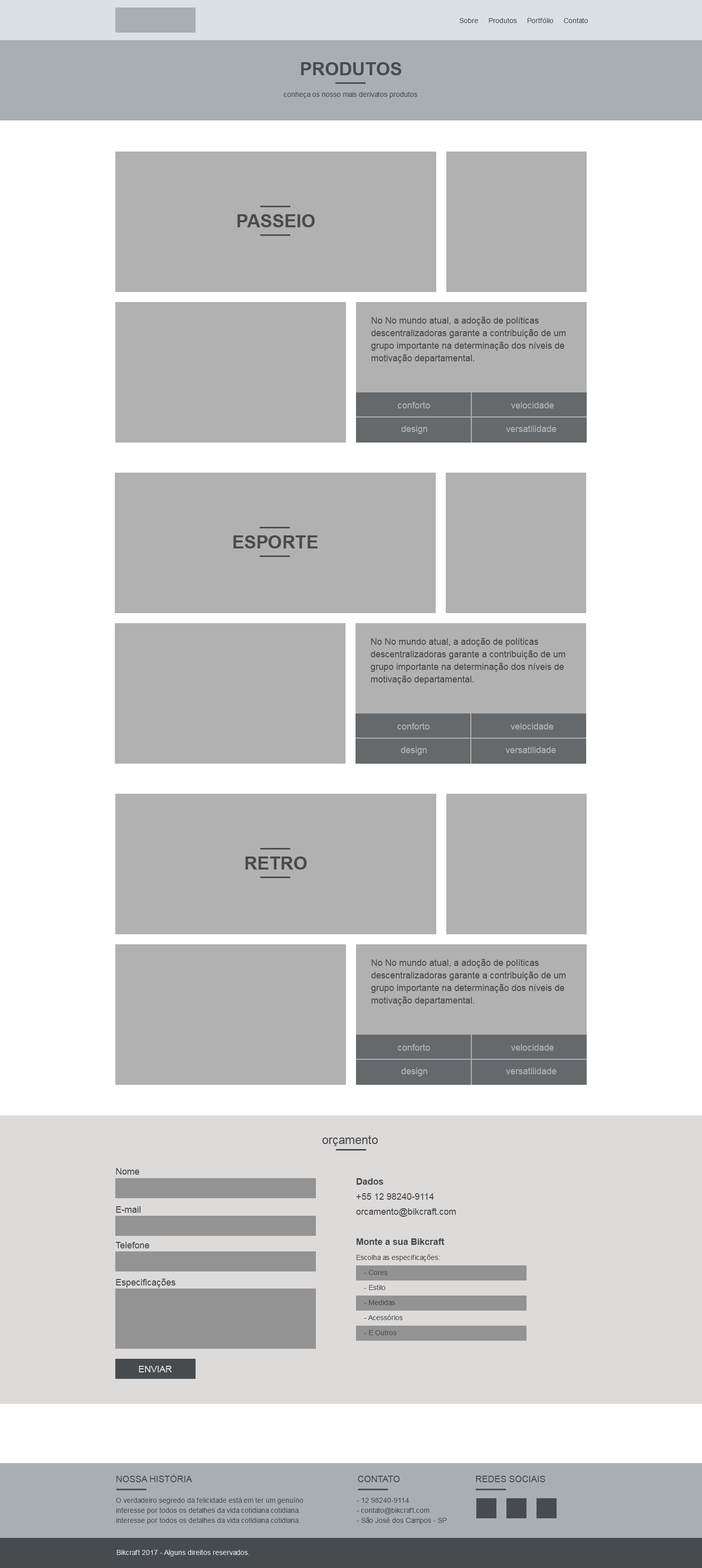
<style>
.page{position:relative;width:702px;height:1568px;background:#ffffff}
.page>*{position:absolute;margin:0}
.t1{font:7px "ArialMT";color:#484b4d}
.t2{font:18.1px "Arial-BoldMT";color:#484b4d;text-transform:uppercase}
.t3{font:9px/12.5px "ArialMT";color:#484b4d}
.t4{font:9px "ArialMT";color:#b2b1b1}
.t5{font:12px "ArialMT";color:#484b4d}
.t6{font:9px "ArialMT";color:#484b4d}
.t7{font:7px/15.1px "ArialMT";color:#484b4d}
.t8{font:9px/15.1px "Arial-BoldMT";color:#484b4d}
.t9{font:9px/15.1px "ArialMT";color:#484b4d}
.t10{font:9px "ArialMT";color:#e4e4e4;text-transform:uppercase}
.t11{font:9px "ArialMT";color:#484b4d;text-transform:uppercase}
.t12{font:7px/10px "ArialMT";color:#484b4d}
.t13{font:7px "ArialMT";color:#d9e0e6}
</style>
<div class="page">
<p class="t1" style="left:460px;top:18px;width:129px;height:5px">Sobre     Produtos     Portfólio     Contato</p>
<p class="t2" style="left:301px;top:62px;width:101px;height:13px">produtos</p>
<p class="t1" style="left:284px;top:92px;width:134px;height:6px">conheça os nosso mais derivatos produtos</p>
<p class="t2" style="left:237px;top:214px;width:78px;height:13px">passeio</p>
<p class="t3" style="left:371px;top:317px;width:195px;height:46px">No No mundo atual, a adoção de políticas descentralizadoras garante a contribuição de um grupo importante na determinação dos níveis de motivação departamental.</p>
<p class="t4" style="left:398px;top:402px;width:33px;height:6px">conforto</p>
<p class="t4" style="left:511px;top:402px;width:43px;height:6px">velocidade</p>
<p class="t4" style="left:401px;top:425px;width:26px;height:9px">design</p>
<p class="t4" style="left:506px;top:425px;width:51px;height:7px">versatilidade</p>
<p class="t2" style="left:233px;top:535px;width:85px;height:13px">esporte</p>
<p class="t3" style="left:371px;top:638px;width:194px;height:46px">No No mundo atual, a adoção de políticas descentralizadoras garante a contribuição de um grupo importante na determinação dos níveis de motivação departamental.</p>
<p class="t4" style="left:397px;top:723px;width:33px;height:7px">conforto</p>
<p class="t4" style="left:511px;top:723px;width:43px;height:7px">velocidade</p>
<p class="t4" style="left:401px;top:747px;width:26px;height:8px">design</p>
<p class="t4" style="left:506px;top:747px;width:50px;height:6px">versatilidade</p>
<p class="t2" style="left:245px;top:857px;width:62px;height:13px">retro</p>
<p class="t3" style="left:371px;top:959px;width:195px;height:47px">No No mundo atual, a adoção de políticas descentralizadoras garante a contribuição de um grupo importante na determinação dos níveis de motivação departamental.</p>
<p class="t4" style="left:398px;top:1044px;width:33px;height:7px">conforto</p>
<p class="t4" style="left:511px;top:1044px;width:43px;height:7px">velocidade</p>
<p class="t4" style="left:401px;top:1068px;width:26px;height:8px">design</p>
<p class="t4" style="left:506px;top:1068px;width:51px;height:6px">versatilidade</p>
<p class="t5" style="left:323px;top:1135px;width:55px;height:11px">orçamento</p>
<p class="t6" style="left:116px;top:1168px;width:23px;height:7px">Nome</p>
<p class="t7" style="left:356px;top:1178px;width:100px;height:157px"><span class="t8">Dados<br></span><span class="t9">+55 12 98240-9114<br>orcamento@bikcraft.com<br><br></span><span class="t8">Monte a sua Bikcraft<br></span>Escolha as especificações:<br>    - Cores<br>    - Estilo<br>    - Medidas<br>    - Acessórios<br>    - E Outros</p>
<p class="t6" style="left:116px;top:1206px;width:25px;height:7px">E-mail</p>
<p class="t6" style="left:115px;top:1242px;width:35px;height:6px">Telefone</p>
<p class="t6" style="left:116px;top:1278px;width:60px;height:10px">Especificações</p>
<p class="t10" style="left:139px;top:1366px;width:33px;height:6px">Enviar</p>
<p class="t11" style="left:116px;top:1474px;width:76px;height:8px">Nossa História</p>
<p class="t11" style="left:358px;top:1476px;width:42px;height:6px">Contato</p>
<p class="t11" style="left:476px;top:1476px;width:69px;height:6px">Redes sociais</p>
<p class="t12" style="left:116px;top:1497px;width:188px;height:27px">O verdadeiro segredo da felicidade está em ter um genuíno interesse por todos os detalhes da vida cotidiana cotidiana.<br>interesse por todos os detalhes da vida cotidiana cotidiana.</p>
<p class="t12" style="left:357px;top:1498px;width:90px;height:26px">- 12 98240-9114<br>- contato@bikcraft.com<br>- São José dos Campos - SP</p>
<p class="t13" style="left:117px;top:1550px;width:132px;height:6px">Bikcraft 2017 - Alguns direitos reservados.</p>
</div>
